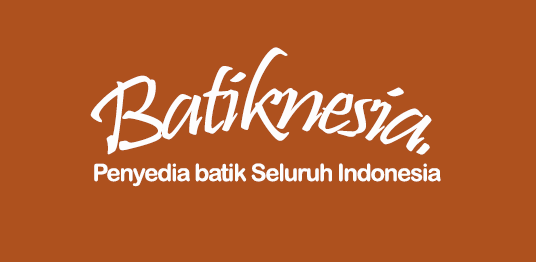
<style>
.page{position:relative;width:536px;height:262px;background:#ae511e}
.page>*{position:absolute;margin:0}
.t1{font:100px "Pristina-Regular";letter-spacing:-0.05em;color:#fdfdfd}
.t2{font:24px "ArialRoundedMTBold";letter-spacing:-0.05em;color:#fdfdfd}
</style>
<div class="page">
<p class="t1" style="left:90px;top:47px;width:342px;height:108px">Batiknesia.</p>
<p class="t2" style="left:94px;top:163px;width:347px;height:24px">Penyedia batik Seluruh Indonesia</p>
</div>
